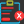
<style>
.page{position:relative;width:24px;height:24px;background:#333333}
.page>*{position:absolute;margin:0}
.t1{font:6.9px "ArialMT";color:#ffffff}
</style>
<div class="page">
<p class="t1" style="left:16px;top:13px;width:6px;height:6px">X</p>
</div>
